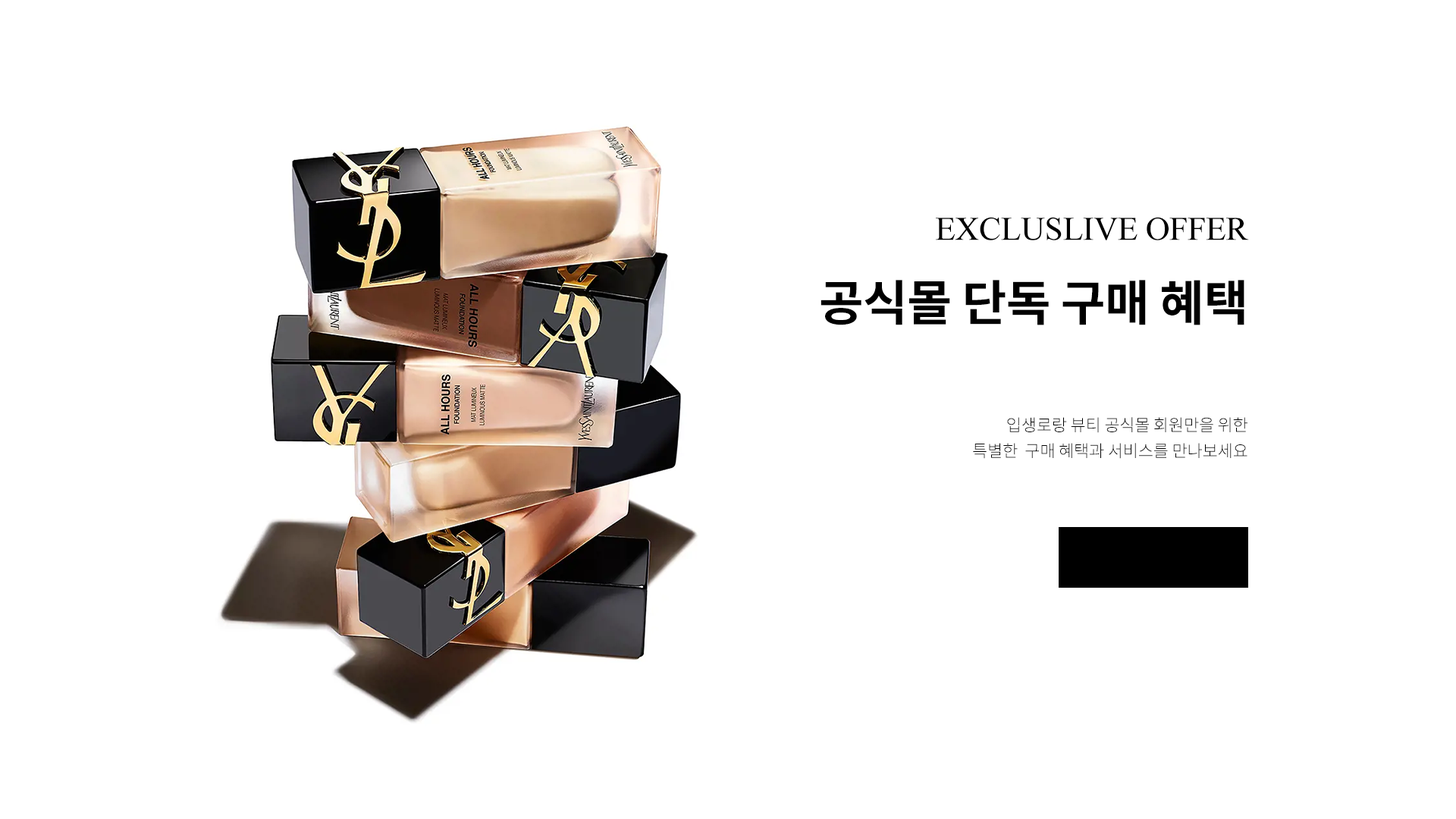
<style>
.page{position:relative;width:1456px;height:819px;background:#ffffff}
.page>*{position:absolute;margin:0}
.t1{font:33.4px "TimesNewRomanPSMT";letter-spacing:-0.01em;color:#000000}
.t2{font:48.5px "NotoSansKR-Bold";letter-spacing:-0.01em;color:#000000}
.t3{font:16.7px/25.8px "NotoSansKR-Light";letter-spacing:-0.01em;color:#000000}
</style>
<div class="page">
<p class="t1" style="left:936px;top:217px;width:313px;height:23px">EXCLUSLIVE OFFER</p>
<p class="t2" style="left:821px;top:280px;width:423px;height:45px">공식몰 단독 구매 혜택</p>
<p class="t3" style="left:973px;top:417px;width:274px;height:42px;text-align:right">입생로랑 뷰티 공식몰 회원만을 위한 특별한  구매 혜택과 서비스를 만나보세요</p>
</div>
